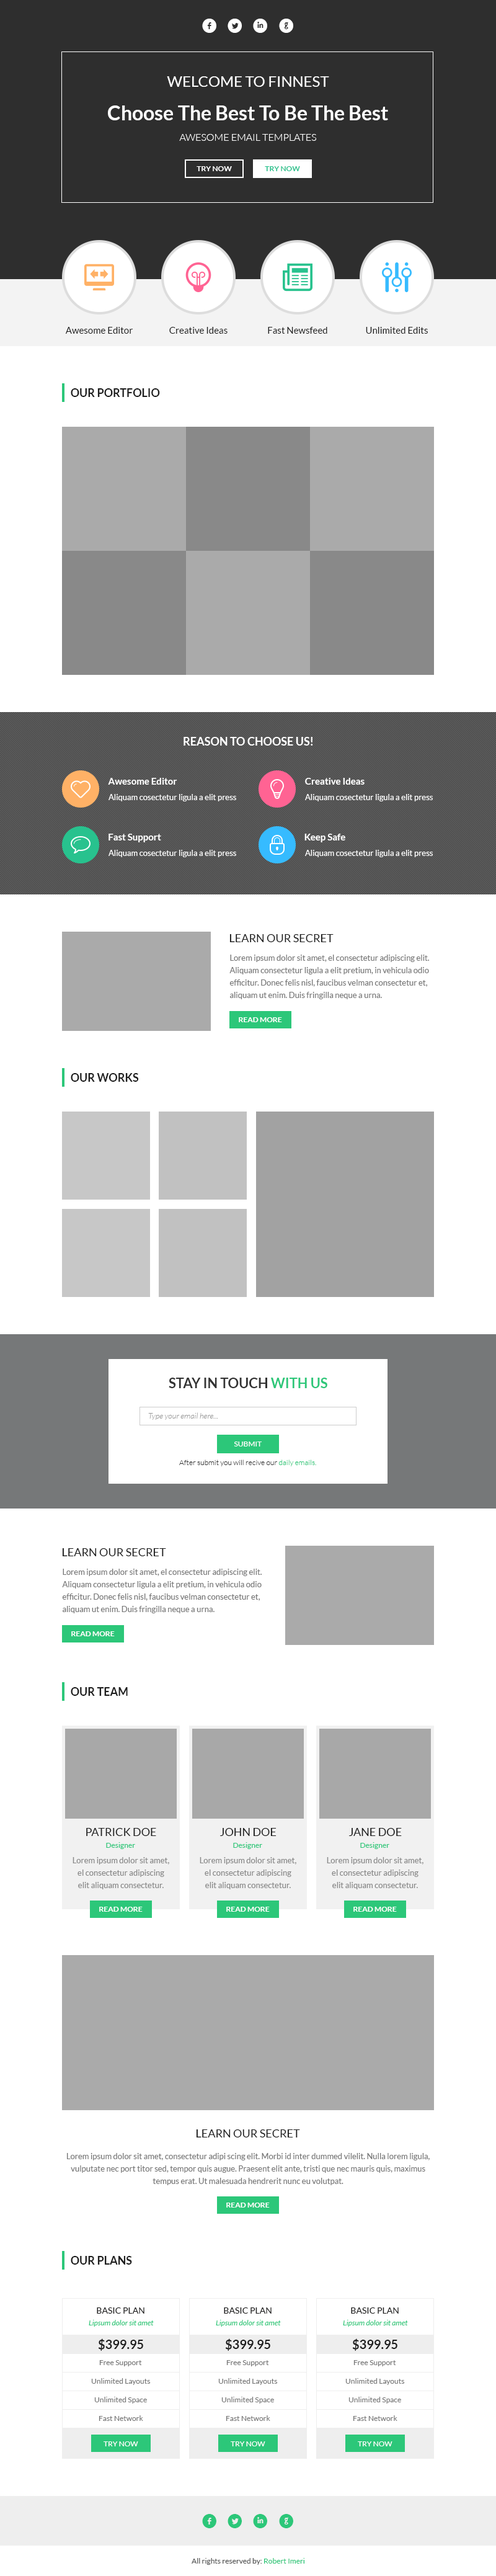
<style>
.page{position:relative;width:496px;height:2576px;background:#ffffff}
.page>*{position:absolute;margin:0}
.t1{font:19.8px "Socialico";letter-spacing:0.5em;color:#ffffff}
.t2{font:14.9px "Lato-Regular";color:#ffffff}
.t3{font:19.8px "Lato-Bold";color:#ffffff}
.t4{font:9.9px "Lato-Light";color:#ffffff}
.t5{font:7.4px "Lato-Bold";color:#ffffff}
.t6{font:7.4px "Lato-Bold";color:#28c28e}
.t7{font:9.3px "Lato-Regular";color:#1e1e1e}
.t8{font:11.2px "Lato-Bold";color:#1e1e1e}
.t9{font:11.2px "Lato-Bold";color:#ffffff}
.t10{font:9.3px "Lato-Bold";color:#ffffff}
.t11{font:8.1px "Lato-Regular";color:#ffffff}
.t12{font:11.2px "Lato-Regular";color:#1e1e1e}
.t13{font:8.1px/12.4px "Lato-Regular";color:#777777}
.t14{font:13.6px "Lato-Bold";color:#333333;text-transform:uppercase}
.t15{font:13.6px "Lato-Bold";color:#2cc779;text-transform:uppercase}
.t16{font:8.1px "Lato-LightItalic";color:#999999}
.t17{font:8.1px "Lato-LightItalic";color:#999999;text-transform:uppercase}
.t18{font:7.4px "Lato-Regular";color:#ffffff;text-transform:uppercase}
.t19{font:7.4px "Lato-Light";color:#333333}
.t20{font:7.4px "Lato-Light";color:#2cc779}
.t21{font:7.4px "Lato-Regular";color:#2cc779}
.t22{font:8.1px/12.4px "Lato-Regular";color:#888888}
.t23{font:8.7px "Lato-Regular";color:#1e1e1e}
.t24{font:7.4px "Lato-Italic";color:#2cc779}
.t25{font:12.4px "Lato-Bold";color:#1e1e1e}
.t26{font:7.4px "Lato-Regular";color:#777777}
.t27{font:19.8px "Socialico";letter-spacing:0.5em;color:#2cc779}
.t28{font:7.4px "Lato-Regular";color:#555555}
</style>
<div class="page">
<p class="t1" style="left:202px;top:19px;width:91px;height:14px">flig</p>
<p class="t2" style="left:167px;top:76px;width:162px;height:11px">WELCOME TO FINNEST</p>
<p class="t3" style="left:108px;top:105px;width:280px;height:15px">Choose The Best To Be The Best</p>
<p class="t4" style="left:179px;top:134px;width:137px;height:7px">AWESOME EMAIL TEMPLATES</p>
<p class="t5" style="left:197px;top:166px;width:35px;height:5px">TRY NOW</p>
<p class="t6" style="left:265px;top:166px;width:35px;height:5px">TRY NOW</p>
<p class="t7" style="left:65px;top:327px;width:68px;height:7px">Awesome Editor</p>
<p class="t7" style="left:169px;top:327px;width:59px;height:7px">Creative Ideas</p>
<p class="t7" style="left:268px;top:327px;width:60px;height:7px">Fast Newsfeed</p>
<p class="t7" style="left:366px;top:327px;width:62px;height:7px">Unlimited Edits</p>
<p class="t8" style="left:71px;top:388px;width:89px;height:9px">OUR PORTFOLIO</p>
<p class="t9" style="left:184px;top:737px;width:129px;height:9px">REASON TO CHOOSE US!</p>
<p class="t10" style="left:108px;top:778px;width:69px;height:7px">Awesome Editor</p>
<p class="t10" style="left:305px;top:778px;width:60px;height:7px">Creative Ideas</p>
<p class="t11" style="left:109px;top:794px;width:127px;height:7px">Aliquam cosectetur ligula a elit press</p>
<p class="t11" style="left:305px;top:794px;width:128px;height:7px">Aliquam cosectetur ligula a elit press</p>
<p class="t10" style="left:109px;top:834px;width:52px;height:8px">Fast Support</p>
<p class="t10" style="left:305px;top:834px;width:40px;height:8px">Keep Safe</p>
<p class="t11" style="left:109px;top:850px;width:127px;height:7px">Aliquam cosectetur ligula a elit press</p>
<p class="t11" style="left:305px;top:850px;width:128px;height:7px">Aliquam cosectetur ligula a elit press</p>
<p class="t12" style="left:230px;top:934px;width:104px;height:8px">LEARN OUR SECRET</p>
<p class="t13" style="left:230px;top:955px;width:199px;height:44px">Lorem ipsum dolor sit amet, el consectetur adipiscing elit. Aliquam consectetur ligula a elit pretium, in vehicula odio efficitur. Donec felis nisl, faucibus velman consectetur et, aliquam ut enim. Duis fringilla neque a urna.</p>
<p class="t5" style="left:239px;top:1017px;width:43px;height:5px">READ MORE</p>
<p class="t8" style="left:71px;top:1073px;width:68px;height:9px">OUR WORKS</p>
<p class="t14" style="left:169px;top:1378px;width:159px;height:10px">Stay In Touch <span class="t15">With Us</span></p>
<p class="t16" style="left:148px;top:1412px;width:70px;height:8px"><span class="t17">T</span>ype your email here...</p>
<p class="t18" style="left:234px;top:1442px;width:28px;height:4px">Submit</p>
<p class="t19" style="left:179px;top:1460px;width:137px;height:6px">After submit you will recive our <span class="t20">daily emails.</span></p>
<p class="t12" style="left:62px;top:1548px;width:104px;height:8px">LEARN OUR SECRET</p>
<p class="t13" style="left:62px;top:1569px;width:200px;height:44px">Lorem ipsum dolor sit amet, el consectetur adipiscing elit. Aliquam consectetur ligula a elit pretium, in vehicula odio efficitur. Donec felis nisl, faucibus velman consectetur et, aliquam ut enim. Duis fringilla neque a urna.</p>
<p class="t5" style="left:71px;top:1631px;width:44px;height:5px">READ MORE</p>
<p class="t8" style="left:71px;top:1687px;width:57px;height:9px">OUR TEAM</p>
<p class="t12" style="left:86px;top:1828px;width:70px;height:8px">PATRICK DOE</p>
<p class="t12" style="left:220px;top:1828px;width:57px;height:8px">JOHN DOE</p>
<p class="t12" style="left:349px;top:1828px;width:53px;height:8px">JANE DOE</p>
<p class="t21" style="left:106px;top:1842px;width:29px;height:7px">Designer</p>
<p class="t21" style="left:233px;top:1842px;width:29px;height:7px">Designer</p>
<p class="t21" style="left:360px;top:1842px;width:30px;height:7px">Designer</p>
<p class="t22" style="left:73px;top:1857px;width:96px;height:32px;text-align:center">Lorem ipsum dolor sit amet, el consectetur adipiscing elit aliquam consectetur.</p>
<p class="t22" style="left:200px;top:1857px;width:96px;height:32px;text-align:center">Lorem ipsum dolor sit amet, el consectetur adipiscing elit aliquam consectetur.</p>
<p class="t22" style="left:327px;top:1857px;width:97px;height:32px;text-align:center">Lorem ipsum dolor sit amet, el consectetur adipiscing elit aliquam consectetur.</p>
<p class="t5" style="left:99px;top:1907px;width:44px;height:5px">READ MORE</p>
<p class="t5" style="left:226px;top:1907px;width:44px;height:5px">READ MORE</p>
<p class="t5" style="left:354px;top:1907px;width:43px;height:5px">READ MORE</p>
<p class="t12" style="left:196px;top:2129px;width:104px;height:8px">LEARN OUR SECRET</p>
<p class="t13" style="left:67px;top:2153px;width:363px;height:32px;text-align:center">Lorem ipsum dolor sit amet, consectetur adipi scing elit. Morbi id inter dummed vilelit. Nulla lorem ligula, vulputate nec port titor sed, tempor quis augue. Praesent elit ante, tristi que nec mauris quis, maximus tempus erat. Ut malesuada hendrerit nunc eu volutpat.</p>
<p class="t5" style="left:226px;top:2203px;width:44px;height:5px">READ MORE</p>
<p class="t8" style="left:71px;top:2256px;width:61px;height:9px">OUR PLANS</p>
<p class="t23" style="left:97px;top:2307px;width:48px;height:7px">BASIC PLAN</p>
<p class="t23" style="left:224px;top:2307px;width:48px;height:7px">BASIC PLAN</p>
<p class="t23" style="left:351px;top:2307px;width:48px;height:7px">BASIC PLAN</p>
<p class="t24" style="left:89px;top:2320px;width:65px;height:7px">Lipsum dolor sit amet</p>
<p class="t24" style="left:216px;top:2320px;width:65px;height:7px">Lipsum dolor sit amet</p>
<p class="t24" style="left:343px;top:2320px;width:65px;height:7px">Lipsum dolor sit amet</p>
<p class="t25" style="left:98px;top:2338px;width:45px;height:13px">$399.95</p>
<p class="t25" style="left:225px;top:2338px;width:45px;height:13px">$399.95</p>
<p class="t25" style="left:352px;top:2338px;width:46px;height:13px">$399.95</p>
<p class="t26" style="left:99px;top:2360px;width:43px;height:6px">Free Support</p>
<p class="t26" style="left:226px;top:2360px;width:43px;height:6px">Free Support</p>
<p class="t26" style="left:354px;top:2360px;width:42px;height:6px">Free Support</p>
<p class="t26" style="left:91px;top:2378px;width:60px;height:7px">Unlimited Layouts</p>
<p class="t26" style="left:218px;top:2378px;width:60px;height:7px">Unlimited Layouts</p>
<p class="t26" style="left:345px;top:2378px;width:60px;height:7px">Unlimited Layouts</p>
<p class="t26" style="left:94px;top:2397px;width:53px;height:7px">Unlimited Space</p>
<p class="t26" style="left:221px;top:2397px;width:53px;height:7px">Unlimited Space</p>
<p class="t26" style="left:349px;top:2397px;width:52px;height:7px">Unlimited Space</p>
<p class="t26" style="left:99px;top:2415px;width:44px;height:6px">Fast Network</p>
<p class="t26" style="left:226px;top:2415px;width:44px;height:6px">Fast Network</p>
<p class="t26" style="left:353px;top:2415px;width:45px;height:6px">Fast Network</p>
<p class="t18" style="left:104px;top:2441px;width:34px;height:5px">Try Now</p>
<p class="t18" style="left:231px;top:2441px;width:34px;height:5px">Try Now</p>
<p class="t18" style="left:358px;top:2441px;width:35px;height:5px">Try Now</p>
<p class="t27" style="left:202px;top:2514px;width:91px;height:14px">flig</p>
<p class="t28" style="left:192px;top:2558px;width:113px;height:7px">All rights reserved by: <span class="t21">Robert Imeri</span></p>
</div>
